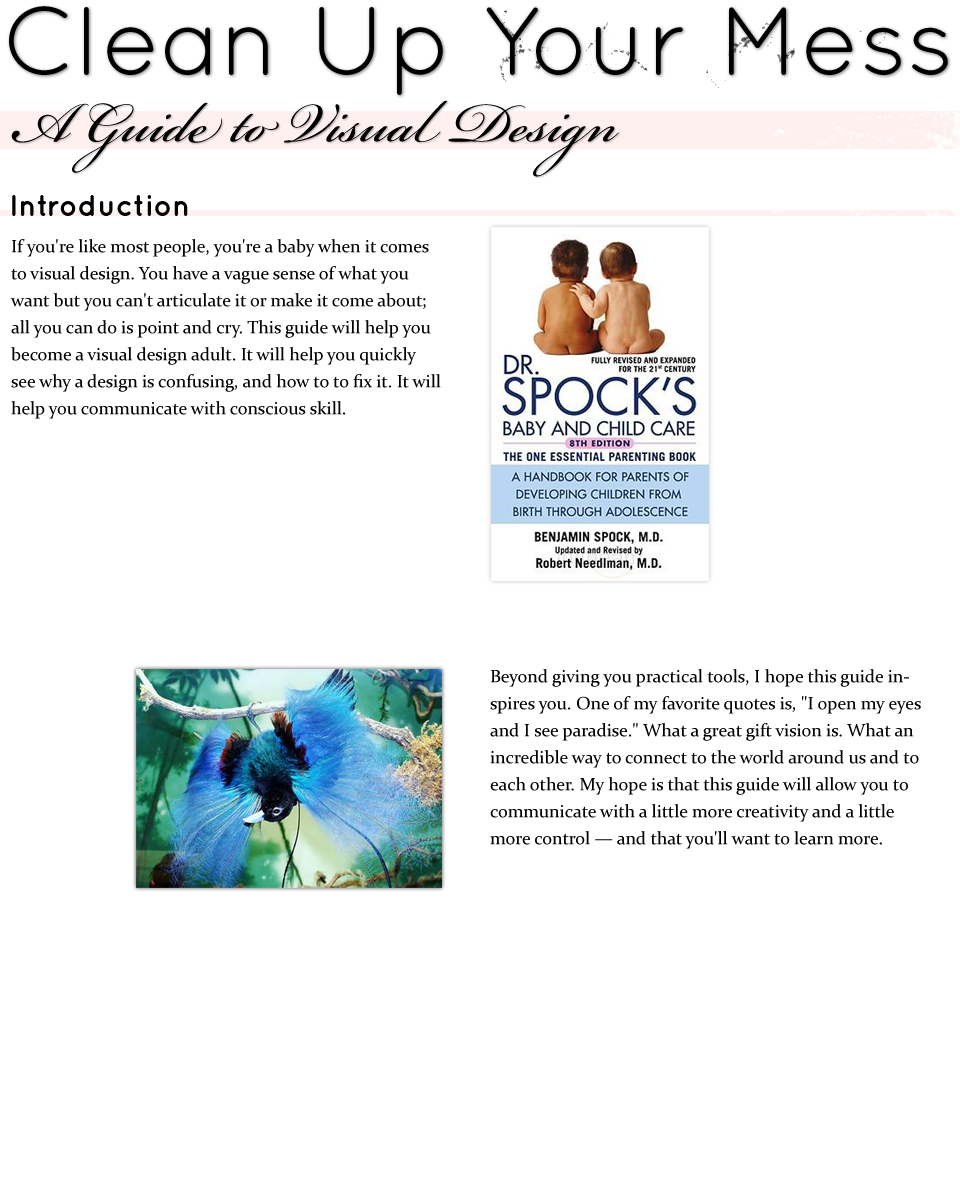
<style>
.page{position:relative;width:960px;height:1200px;background:#ffffff}
.page>*{position:absolute;margin:0}
.t1{font:97px "QuicksandBook-Regular";color:#000000}
.t2{font:87px "BickhamScriptPro-Regular";color:#000000}
.t3{font:30px "QuicksandBold-Regular";color:#000000}
.t4{font:18px/27px "Constantia";color:#000000}
</style>
<div class="page">
<p class="t1" style="left:9px;top:6px;width:939px;height:89px">Clean Up Your Mess</p>
<p class="t2" style="left:11px;top:100px;width:609px;height:77px">A Guide to Visual Design</p>
<p class="t3" style="left:12px;top:195px;width:176px;height:21px">Introduction</p>
<p class="t4" style="left:10px;top:239px;width:431px;height:180px">If you're like most people, you're a baby when it comes to visual design. You have a vague sense of what you want but you can't articulate it or make it come about; all you can do is point and cry. This guide will help you become a visual design adult. It will help you quickly see why a design is confusing, and how to to fix it. It will help you communicate with conscious skill.</p>
<p class="t4" style="left:490px;top:669px;width:431px;height:180px">Beyond giving you practical tools, I hope this guide inspires you. One of my favorite quotes is, "I open my eyes and I see paradise." What a great gift vision is. What an incredible way to connect to the world around us and to each other. My hope is that this guide will allow you to communicate with a little more creativity and a little more control — and that you'll want to learn more.</p>
</div>
